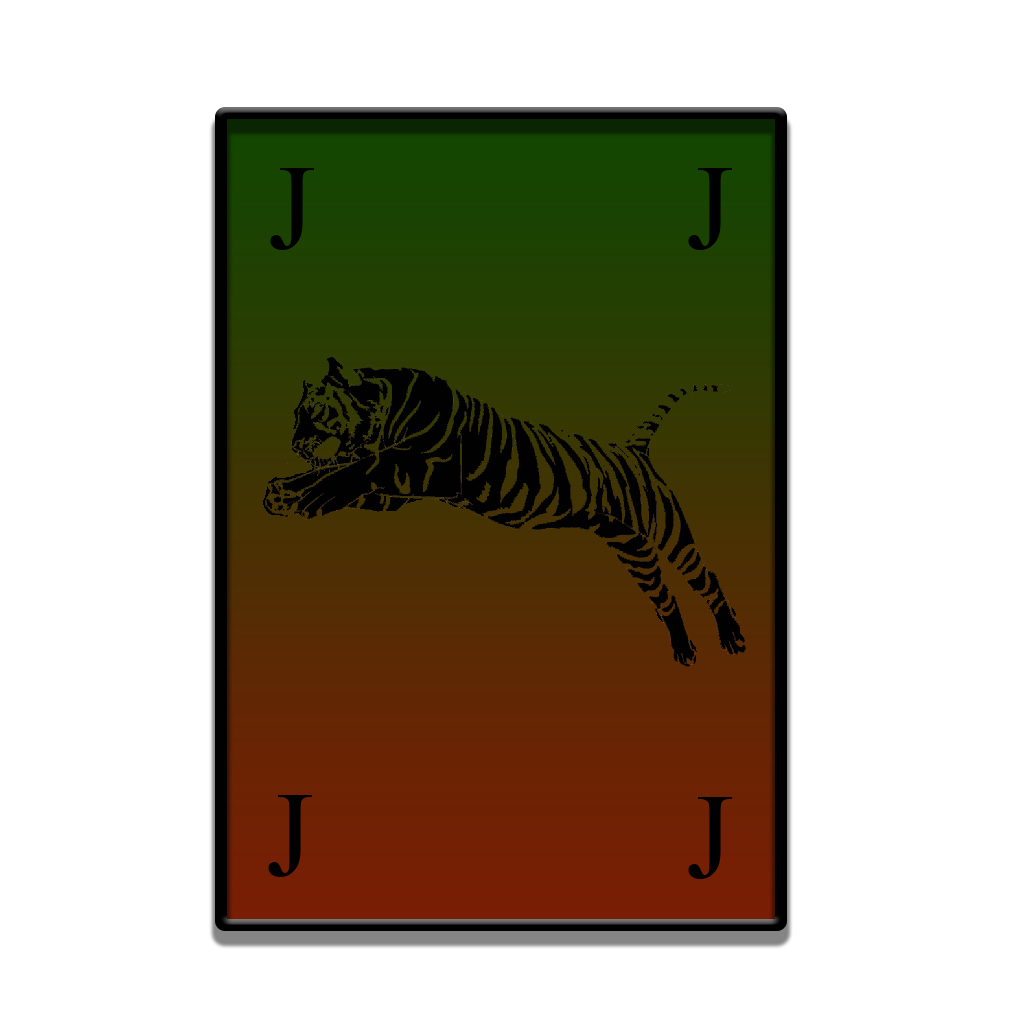
<style>
.page{position:relative;width:1024px;height:1024px;background:#ffffff}
.page>*{position:absolute;margin:0}
.t1{font:120px "TimesNewRomanPSMT";color:#000000}
</style>
<div class="page">
<p class="t1" style="left:270px;top:168px;width:44px;height:82px">J</p>
<p class="t1" style="left:688px;top:168px;width:44px;height:82px">J</p>
<p class="t1" style="left:268px;top:795px;width:44px;height:82px">J</p>
<p class="t1" style="left:688px;top:797px;width:44px;height:82px">J</p>
</div>
